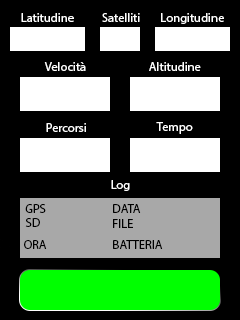
<style>
.page{position:relative;width:240px;height:320px;background:#000000}
.page>*{position:absolute;margin:0}
.t1{font:12.5px "MyriadPro-Regular";color:#ffffff}
.t2{font:12.5px "MyriadPro-Regular";color:#000000}
</style>
<div class="page">
<p class="t1" style="left:21px;top:13px;width:53px;height:9px">Latitudine</p>
<p class="t1" style="left:102px;top:13px;width:38px;height:9px">Satelliti</p>
<p class="t1" style="left:161px;top:13px;width:63px;height:11px">Longitudine</p>
<p class="t1" style="left:44px;top:62px;width:42px;height:9px">Velocità</p>
<p class="t1" style="left:149px;top:62px;width:52px;height:9px">Altitudine</p>
<p class="t1" style="left:46px;top:123px;width:40px;height:9px">Percorsi</p>
<p class="t1" style="left:156px;top:122px;width:37px;height:12px">Tempo</p>
<p class="t1" style="left:111px;top:180px;width:19px;height:11px">Log</p>
<p class="t2" style="left:25px;top:204px;width:21px;height:9px">GPS</p>
<p class="t2" style="left:113px;top:204px;width:28px;height:9px">DATA</p>
<p class="t2" style="left:25px;top:218px;width:15px;height:9px">SD</p>
<p class="t2" style="left:113px;top:219px;width:20px;height:9px">FILE</p>
<p class="t2" style="left:24px;top:240px;width:23px;height:9px">ORA</p>
<p class="t2" style="left:113px;top:240px;width:50px;height:9px">BATTERIA</p>
</div>
